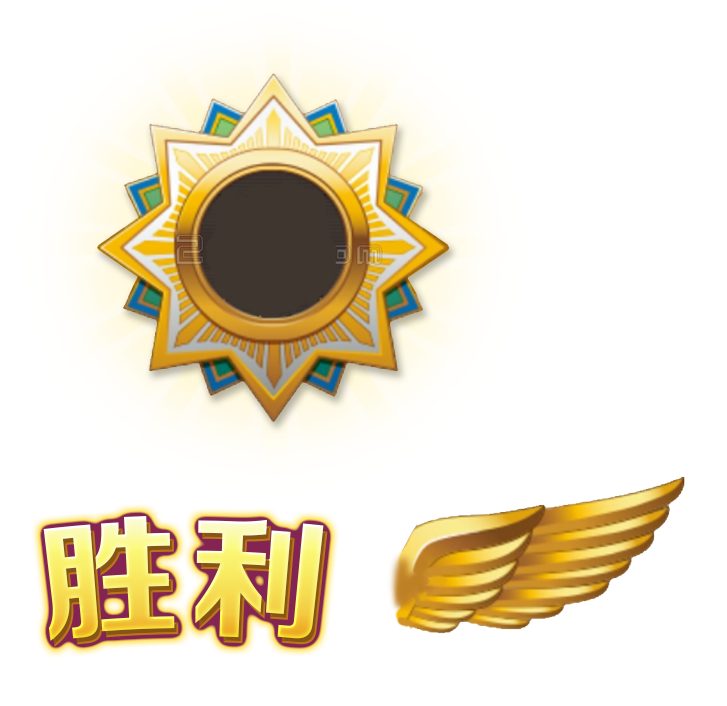
<style>
.page{position:relative;width:727px;height:706px;background:#ffffff}
.page>*{position:absolute;margin:0}
.t1{font:130px "FZZCHJW--GB1-0";letter-spacing:0.05em}
</style>
<div class="page">
<p class="t1" style="left:43px;top:516px;width:281px;height:125px">胜利</p>
</div>
